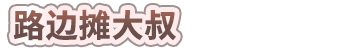
<style>
.page{position:relative;width:360px;height:50px;background:#ffffff}
.page>*{position:absolute;margin:0}
.t1{font:32px "SourceHanSansSC-Bold";color:#6f524c;font-weight:bold}
</style>
<div class="page">
<p class="t1" style="left:13px;top:9px;width:163px;height:32px">路边摊大叔</p>
</div>
